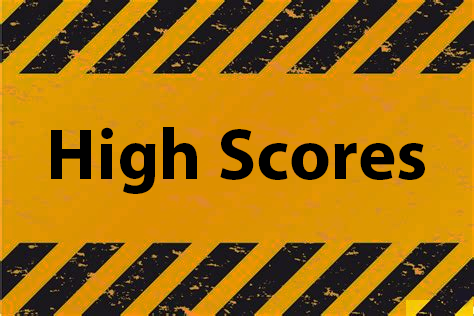
<style>
.page{position:relative;width:474px;height:316px}
.page>*{position:absolute;margin:0}
.t1{font:72.8px "MyriadPro-Bold";color:#000000}
</style>
<div class="page">
<p class="t1" style="left:51px;top:127px;width:374px;height:67px">High Scores</p>
</div>
